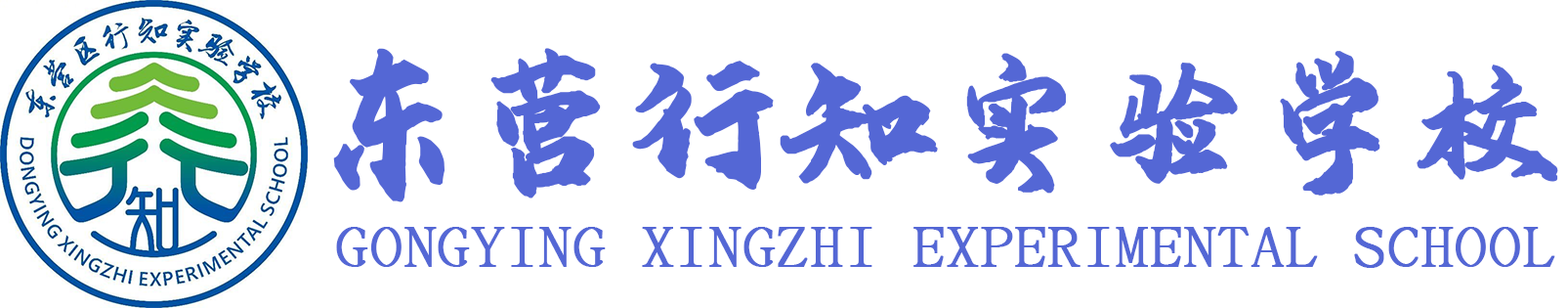
<style>
.page{position:relative;width:1568px;height:308px;background:#ffffff}
.page>*{position:absolute;margin:0}
.t1{font:142.5px "YUN-FEN-FEI-YUN-TI";color:#5467d5;font-weight:bold}
.t2{font:64.3px "BousungEG-Light-GB";color:#5467d5;font-weight:bold}
</style>
<div class="page">
<p class="t1" style="left:333px;top:48px;width:1225px;height:154px">东营行知实验学校</p>
<p class="t2" style="left:336px;top:227px;width:1219px;height:41px">GONGYING XINGZHI EXPERIMENTAL SCHOOL</p>
</div>
